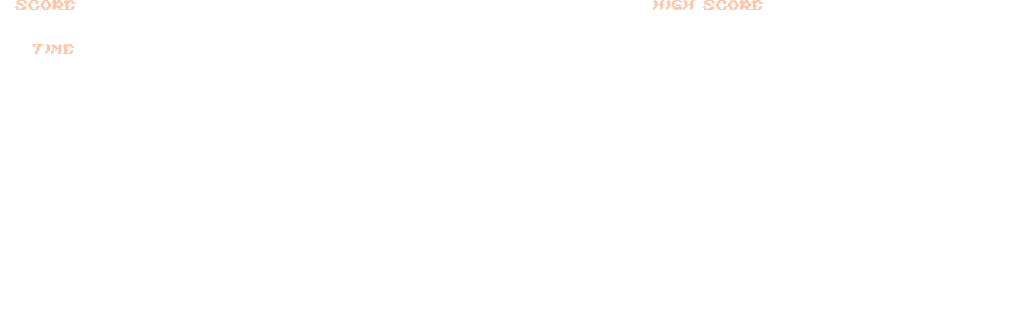
<style>
.page{position:relative;width:1024px;height:334px;background:#ffffff}
.page>*{position:absolute;margin:0}
.t1{font:18px "ghouls-ghosts-and-goblins";color:#fec5a9}
</style>
<div class="page">
<p class="t1" style="left:15px;top:0px;width:61px;height:10px">Score</p>
<p class="t1" style="left:653px;top:0px;width:111px;height:10px">High Score</p>
<p class="t1" style="left:32px;top:44px;width:43px;height:10px">Time</p>
</div>
